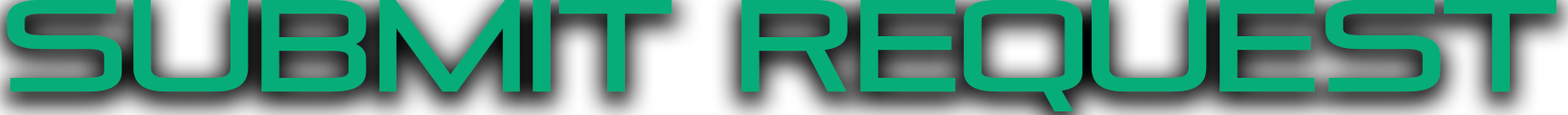
<style>
.page{position:relative;width:1568px;height:115px}
.page>*{position:absolute;margin:0}
.t1{font:130.7px "Pirulen";letter-spacing:-0.025em;color:#06ad78}
</style>
<div class="page">
<p class="t1" style="left:6px;top:0px;width:1551px;height:112px">SUBMIT REQUEST</p>
</div>
